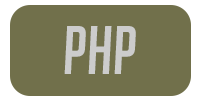
<style>
.page{position:relative;width:200px;height:100px;background:#71704b}
.page>*{position:absolute;margin:0}
.t1{font:66.7px "BigNoodleTitling-Oblique";color:#cccccc}
</style>
<div class="page">
<p class="t1" style="left:64px;top:26px;width:72px;height:48px">PHP</p>
</div>
